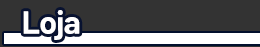
<style>
.page{position:relative;width:260px;height:47px;background:#333333}
.page>*{position:absolute;margin:0}
.t1{font:32px "Barlow-Bold";letter-spacing:-0.025em;color:#ffffff}
</style>
<div class="page">
<p class="t1" style="left:23px;top:10px;width:57px;height:30px">Loja</p>
</div>
